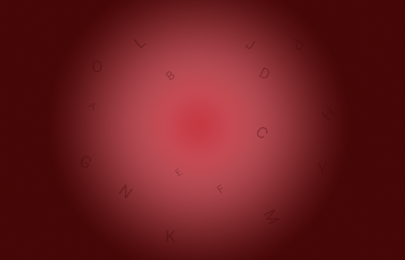
<style>
.page{position:relative;width:405px;height:260px}
.page>*{position:absolute;margin:0}
.t1{font:16px "Roboto-Regular";color:#6c1f21;scale:1.03 1}
.t2{font:13.5px "Roboto-Regular";color:#722225}
.t3{font:16px "Roboto-Regular";color:#470606}
.t4{font:16px "Roboto-Regular";color:#470606;scale:1.03 1}
.t5{font:11.6px "Roboto-Regular";color:#903439;scale:1.03 1}
.t6{font:14.7px "Roboto-Regular";color:#7b272b;scale:1.03 1}
.t7{font:9.5px "Roboto-Regular";color:#661a1d}
.t8{font:16px "Roboto-Regular";color:#8d3238}
.t9{font:9.6px "Roboto-Regular";scale:1.03 1}
.t10{font:16px "Roboto-Regular";color:#6d1f22;scale:1.03 1}
.t11{font:10.6px "Roboto-Regular";color:#883035;scale:1.03 1}
.t12{font:16px "Roboto-Regular";color:#5f1618;scale:1.03 1}
</style>
<div class="page">
<p class="t1" style="left:133px;top:38px;width:14px;height:11px;rotate:-40deg">L</p>
<p class="t2" style="left:245px;top:41px;width:11px;height:8px;rotate:31deg">J</p>
<p class="t3" style="left:294px;top:38px;width:11px;height:12px;rotate:122deg;opacity:0.4">P</p>
<p class="t4" style="left:92px;top:60px;width:10px;height:13px;opacity:0.4">O</p>
<p class="t5" style="left:165px;top:71px;width:10px;height:10px;rotate:-37deg">B</p>
<p class="t6" style="left:259px;top:67px;width:11px;height:12px;rotate:28deg">D</p>
<p class="t7" style="left:88px;top:102px;width:7px;height:9px;rotate:35deg">A</p>
<p class="t4" style="left:321px;top:106px;width:15px;height:15px;rotate:-45deg;opacity:0.4">H</p>
<p class="t8" style="left:256px;top:127px;width:12px;height:11px;rotate:40deg">C</p>
<p class="t3" style="left:80px;top:156px;width:11px;height:12px;rotate:28deg;opacity:0.4">G</p>
<p class="t9" style="left:175px;top:168px;width:8px;height:9px;rotate:-38deg">E</p>
<p class="t4" style="left:317px;top:163px;width:10px;height:12px;opacity:0.4">Y</p>
<p class="t10" style="left:118px;top:184px;width:15px;height:15px;rotate:36deg">N</p>
<p class="t11" style="left:216px;top:184px;width:7px;height:10px;rotate:-34deg">F</p>
<p class="t4" style="left:264px;top:209px;width:16px;height:16px;rotate:64deg;opacity:0.4">M</p>
<p class="t12" style="left:166px;top:230px;width:10px;height:12px">K</p>
</div>
